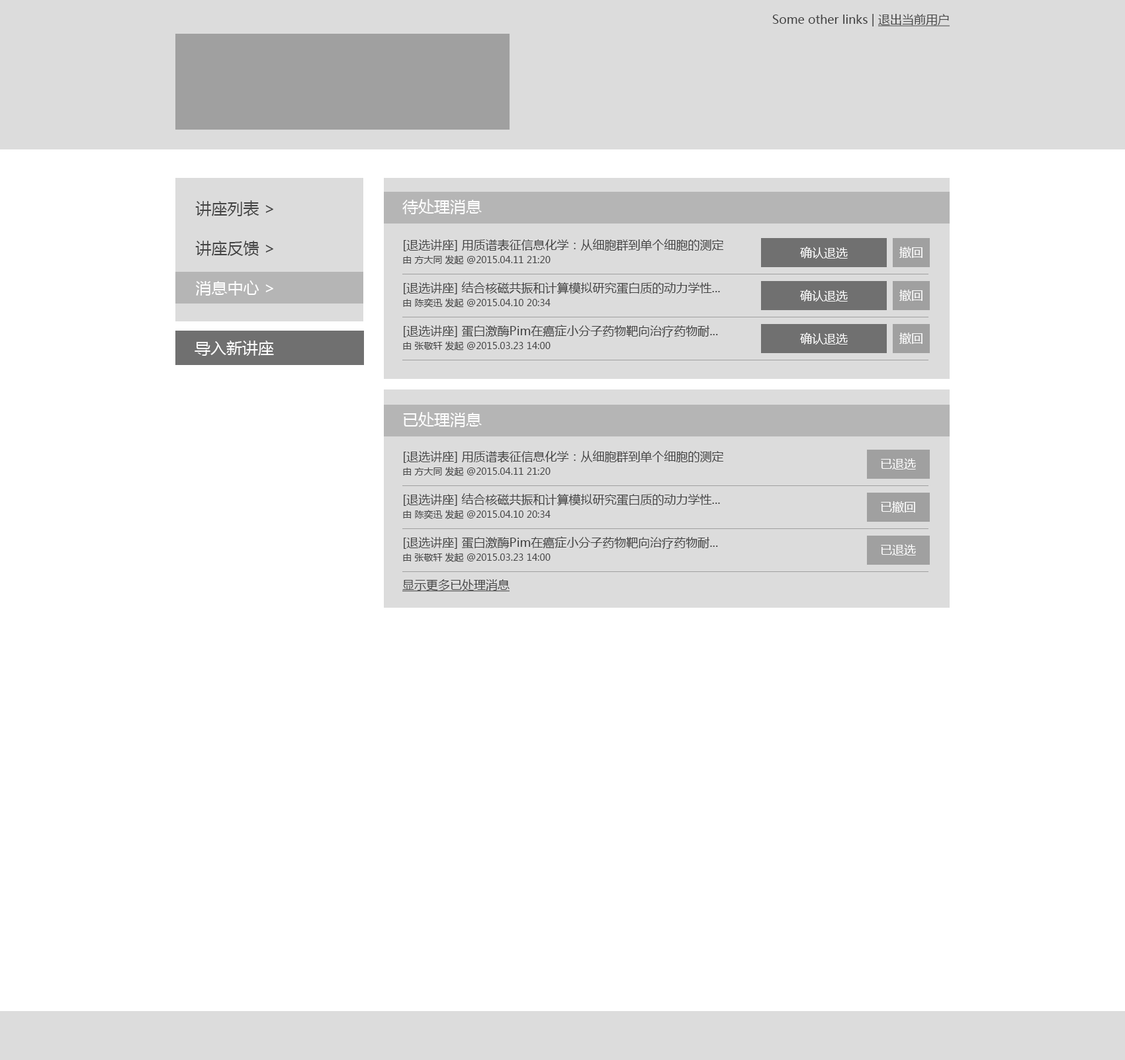
<style>
.page{position:relative;width:1125px;height:1060px;background:#ffffff}
.page>*{position:absolute;margin:0}
.t1{font:11.9px "MicrosoftYaHei";color:#434343}
.t2{font:11.9px "MicrosoftYaHei";color:#434343;text-decoration:underline}
.t3{font:15.9px/39.7px "MicrosoftYaHei";color:#434343}
.t4{font:15.9px/39.7px "MicrosoftYaHei";color:#ffffff}
.t5{font:15.9px "MicrosoftYaHei";color:#ffffff}
.t6{font:11.9px/15.9px "MicrosoftYaHei";color:#434343}
.t7{font:9.3px/15.9px "MicrosoftYaHei";color:#434343}
.t8{font:11.9px "MicrosoftYaHei";color:#ffffff}
</style>
<div class="page">
<p class="t1" style="left:772px;top:14px;width:177px;height:12px">Some other links | <span class="t2">退出当前用户</span></p>
<p class="t3" style="left:195px;top:200px;width:78px;height:96px">讲座列表 &gt;<br>讲座反馈 &gt;<br><span class="t4">消息中心 &gt;</span></p>
<p class="t5" style="left:402px;top:199px;width:80px;height:15px">待处理消息</p>
<p class="t6" style="left:403px;top:239px;width:321px;height:26px">[退选讲座] 用质谱表征信息化学：从细胞群到单个细胞的测定<br><span class="t7">由 方大同 发起 @2015.04.11 21:20</span></p>
<p class="t8" style="left:800px;top:247px;width:47px;height:12px">确认退选</p>
<p class="t8" style="left:899px;top:247px;width:23px;height:11px">撤回</p>
<p class="t6" style="left:403px;top:282px;width:317px;height:26px">[退选讲座] 结合核磁共振和计算模拟研究蛋白质的动力学性...<br><span class="t7">由 陈奕迅 发起 @2015.04.10 20:34</span></p>
<p class="t8" style="left:800px;top:290px;width:47px;height:12px">确认退选</p>
<p class="t8" style="left:899px;top:290px;width:23px;height:11px">撤回</p>
<p class="t6" style="left:403px;top:325px;width:315px;height:26px">[退选讲座] 蛋白激酶Pim在癌症小分子药物靶向治疗药物耐...<br><span class="t7">由 张敬轩 发起 @2015.03.23 14:00</span></p>
<p class="t5" style="left:194px;top:341px;width:80px;height:15px">导入新讲座</p>
<p class="t8" style="left:800px;top:333px;width:47px;height:12px">确认退选</p>
<p class="t8" style="left:899px;top:333px;width:23px;height:11px">撤回</p>
<p class="t5" style="left:403px;top:412px;width:79px;height:15px">已处理消息</p>
<p class="t6" style="left:403px;top:450px;width:321px;height:26px">[退选讲座] 用质谱表征信息化学：从细胞群到单个细胞的测定<br><span class="t7">由 方大同 发起 @2015.04.11 21:20</span></p>
<p class="t8" style="left:880px;top:458px;width:36px;height:12px">已退选</p>
<p class="t6" style="left:403px;top:493px;width:317px;height:26px">[退选讲座] 结合核磁共振和计算模拟研究蛋白质的动力学性...<br><span class="t7">由 陈奕迅 发起 @2015.04.10 20:34</span></p>
<p class="t8" style="left:880px;top:501px;width:35px;height:12px">已撤回</p>
<p class="t6" style="left:403px;top:536px;width:315px;height:26px">[退选讲座] 蛋白激酶Pim在癌症小分子药物靶向治疗药物耐...<br><span class="t7">由 张敬轩 发起 @2015.03.23 14:00</span></p>
<p class="t8" style="left:880px;top:544px;width:36px;height:12px">已退选</p>
<p class="t2" style="left:402px;top:579px;width:107px;height:13px">显示更多已处理消息</p>
</div>
